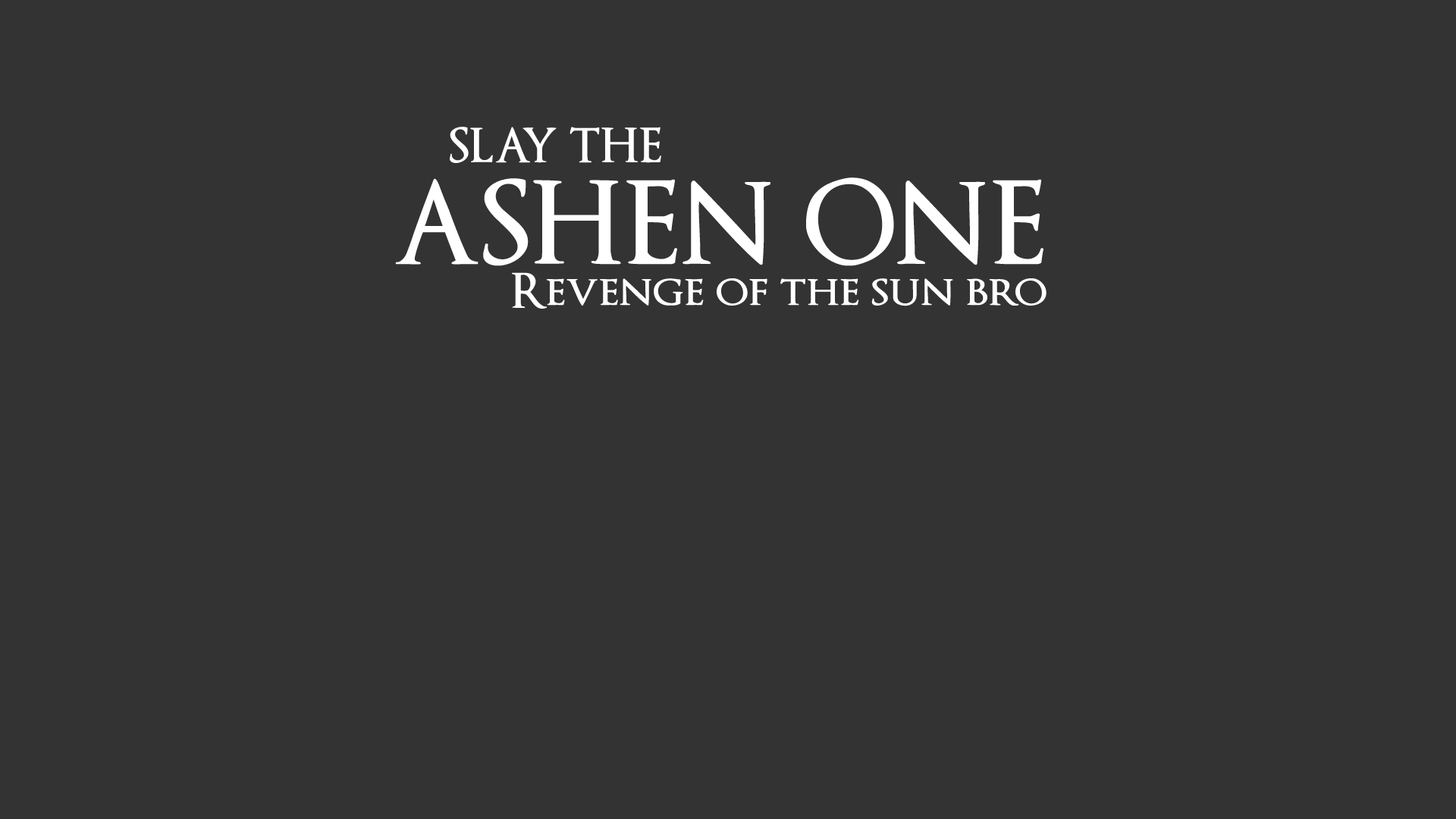
<style>
.page{position:relative;width:1456px;height:819px;background:#333333}
.page>*{position:absolute;margin:0}
.t1{font:46.5px "OptimusPrincepsSemiBold";color:#ffffff}
.t2{font:112.4px "OptimusPrincepsSemiBold";color:#ffffff}
.t3{font:41.1px "OptimusPrincepsSemiBold";color:#ffffff}
.t4{font:47.1px "OptimusPrincepsSemiBold";color:#ffffff}
</style>
<div class="page">
<p class="t1" style="left:450px;top:127px;width:211px;height:36px">SLAY THE</p>
<p class="t2" style="left:395px;top:177px;width:648px;height:89px"><span class="t3"><br></span>ASHEN ONE</p>
<p class="t4" style="left:512px;top:272px;width:534px;height:37px">Revenge of the sun bro</p>
</div>
